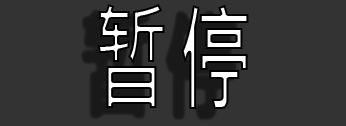
<style>
.page{position:relative;width:346px;height:126px;background:#333333}
.page>*{position:absolute;margin:0}
.t1{font:119.4px "MicrosoftJhengHeiBold";letter-spacing:0.1em;scale:0.64 1}
</style>
<div class="page">
<p class="t1" style="left:97px;top:4px;width:152px;height:105px">暂停</p>
</div>
